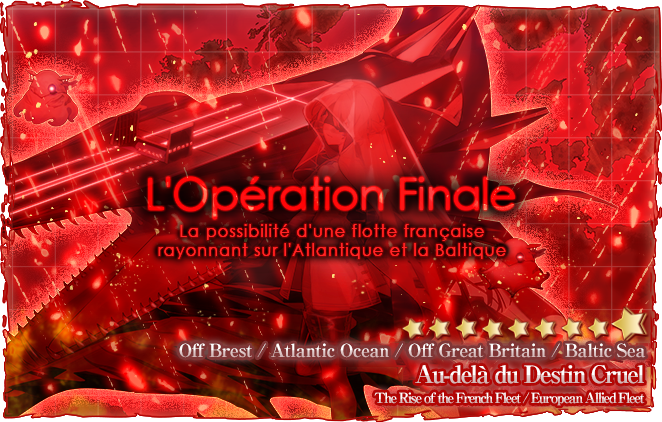
<style>
.page{position:relative;width:662px;height:422px}
.page>*{position:absolute;margin:0}
.t1{font:18px "RyuminPro-ExBold";letter-spacing:-0.04em}
.t2{font:24px "RyuminPro-ExBold";letter-spacing:-0.08em}
.t3{font:14px "RyuminPro-ExBold";letter-spacing:-0.12em}
</style>
<div class="page">
<p class="t1" style="left:179px;top:343px;width:467px;height:15px">Off Brest / Atlantic Ocean / Off Great Britain / Baltic Sea</p>
<p class="t2" style="left:415px;top:365px;width:229px;height:19px">Au-delà du Destin Cruel</p>
<p class="t3" style="left:374px;top:392px;width:271px;height:14px">The Rise of the French Fleet / European Allied Fleet</p>
</div>
